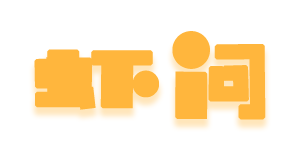
<style>
.page{position:relative;width:300px;height:150px;background:#ffffff}
.page>*{position:absolute;margin:0}
.t1{font:145.8px "HYZhuZiTongNianTiW";letter-spacing:0.02em;color:#ffb63d;font-weight:bold}
</style>
<div class="page">
<p class="t1" style="left:34px;top:31px;width:232px;height:89px">虾问</p>
</div>
